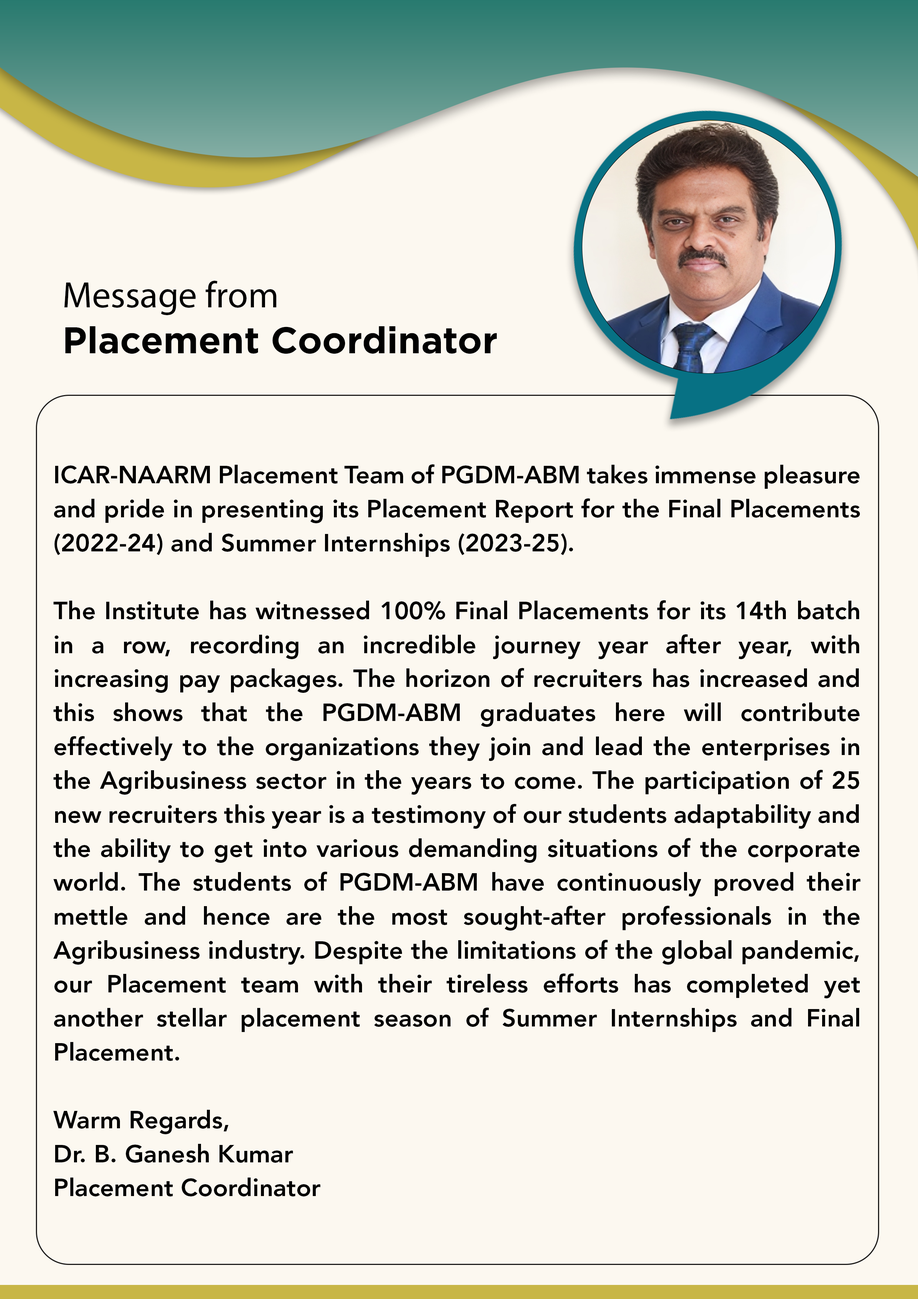
<style>
.page{position:relative;width:918px;height:1299px;background:#fcf8f0}
.page>*{position:absolute;margin:0}
.t1{font:37px "MyriadPro-Regular";color:#010101}
.t2{font:37px "Gotham-Bold";color:#010101}
.t3{font:24.7px/33.9px "AvenirLTStd-Heavy";color:#010101}
</style>
<div class="page">
<p class="t1" style="left:64px;top:281px;width:213px;height:34px">Message from</p>
<p class="t2" style="left:65px;top:326px;width:432px;height:28px">Placement Coordinator</p>
<p class="t3" style="left:53px;top:464px;width:808px;height:732px;text-align:justify">ICAR-NAARM Placement Team of PGDM-ABM takes immense pleasure and pride in presenting its Placement Report for the Final Placements (2022-24) and Summer Internships (2023-25).<br><br>The Institute has witnessed 100% Final Placements for its 14th batch in a row, recording an incredible journey year after year, with increasing pay packages. The horizon of recruiters has increased and this shows that the PGDM-ABM graduates here will contribute effectively to the organizations they join and lead the enterprises in the Agribusiness sector in the years to come. The participation of 25 new recruiters this year is a testimony of our students adaptability and the ability to get into various demanding situations of the corporate world. The students of PGDM-ABM have continuously proved their mettle and hence are the most sought-after professionals in the Agribusiness industry. Despite the limitations of the global pandemic, our Placement team with their tireless efforts has completed yet another stellar placement season of Summer Internships and Final Placement.<br><br>Warm Regards,<br>Dr. B. Ganesh Kumar<br>Placement Coordinator</p>
</div>
